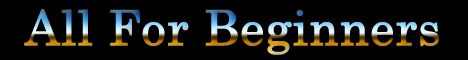
<style>
.page{position:relative;width:468px;height:60px;background:#000000}
.page>*{position:absolute;margin:0}
.t1{font:48px "Century";font-weight:bold}
</style>
<div class="page">
<p class="t1" style="left:24px;top:9px;width:415px;height:46px">All For Beginners</p>
</div>
